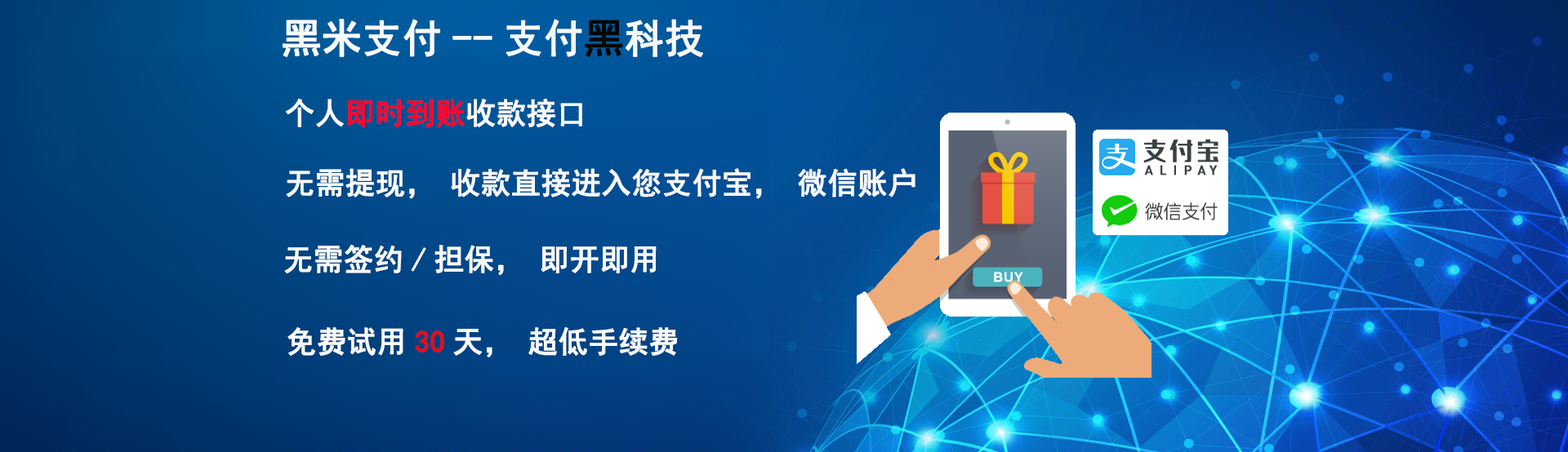
<style>
.page{position:relative;width:1568px;height:452px}
.page>*{position:absolute;margin:0}
.t1{font:39.9px "SimHei";color:#f7fafc;font-weight:bold}
.t2{font:39.9px "SimHei";color:#070707;font-weight:bold}
.t3{font:29.9px "SimHei";color:#fb052d;font-weight:bold}
.t4{font:29.9px "SimHei";color:#f7fafc;font-weight:bold}
.t5{font:29.9px "SimHei";color:#f60611;font-weight:bold}
</style>
<div class="page">
<p class="t1" style="left:283px;top:19px;width:420px;height:38px">黑米支付--支付<span class="t2">黑</span>科技</p>
<p class="t3" style="left:286px;top:98px;width:296px;height:30px"><span class="t4">个人</span>即时到账<span class="t4">收款接口</span></p>
<p class="t4" style="left:286px;top:168px;width:629px;height:31px">无需提现，收款直接进入您支付宝，微信账户</p>
<p class="t4" style="left:284px;top:245px;width:373px;height:31px">无需签约/担保，即开即用</p>
<p class="t4" style="left:287px;top:327px;width:391px;height:31px">免费试用<span class="t5">30</span>天，超低手续费</p>
</div>
